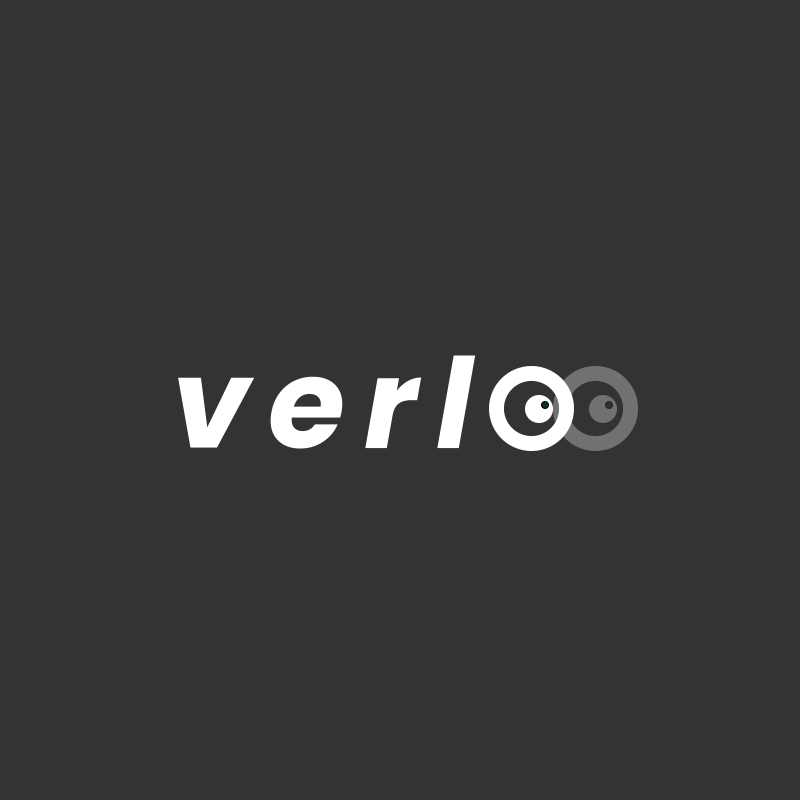
<style>
.page{position:relative;width:800px;height:800px;background:#333333}
.page>*{position:absolute;margin:0}
.t1{font:125px "Poppins-BoldItalic";letter-spacing:0.15em;color:#ffffff}
</style>
<div class="page">
<p class="t1" style="left:178px;top:355px;width:298px;height:94px">verl</p>
</div>
